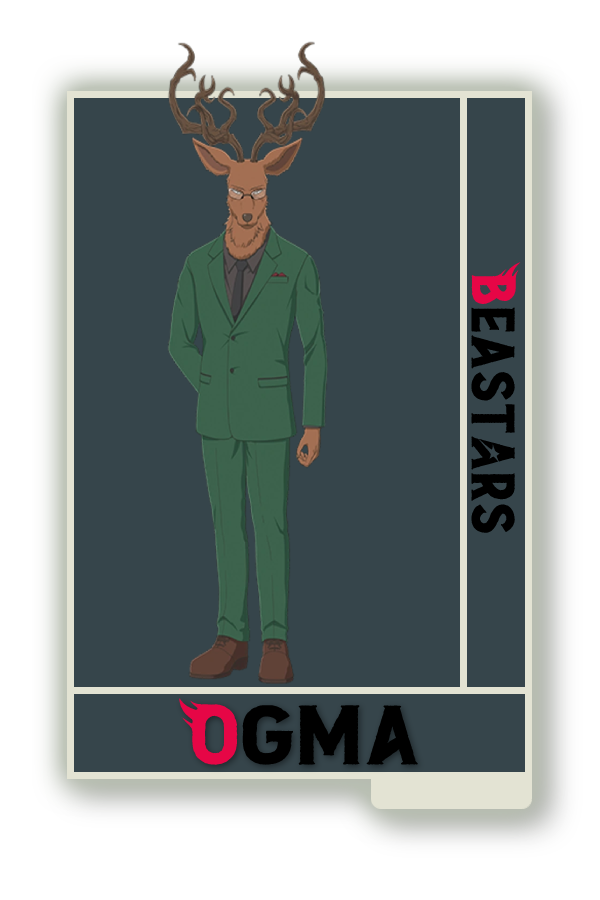
<style>
.page{position:relative;width:600px;height:900px;background:#36454b}
.page>*{position:absolute;margin:0}
.t1{font:48.8px "BEAST";color:#000000}
.t2{font:48.8px "BEAST";color:#e60646}
.t3{font:67px "BEAST";color:#000000;scale:1.12 1}
.t4{font:67px "BEAST";color:#e60646;scale:1.12 1}
</style>
<div class="page">
<p class="t1" style="left:471px;top:262px;width:50px;height:271px;rotate:90deg"><span class="t2">B</span>east@rs</p>
<p class="t3" style="left:179px;top:698px;width:239px;height:67px"><span class="t4">O</span>gma</p>
</div>
